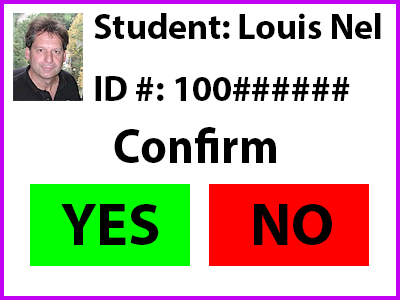
<style>
.page{position:relative;width:400px;height:300px;background:#ffffff}
.page>*{position:absolute;margin:0}
.t1{font:36px "MyriadPro-Bold";color:#000000}
.t2{font:49.7px "MyriadPro-Bold";color:#000000;scale:0.94 1}
.t3{font:60px "MyriadPro-Bold";color:#000000}
</style>
<div class="page">
<p class="t1" style="left:94px;top:13px;width:287px;height:26px">Student: Louis Nel</p>
<p class="t1" style="left:95px;top:76px;width:255px;height:25px">ID #: 100######</p>
<p class="t2" style="left:114px;top:127px;width:162px;height:36px">Confirm</p>
<p class="t3" style="left:61px;top:204px;width:98px;height:41px">YES</p>
<p class="t3" style="left:254px;top:204px;width:78px;height:41px">NO</p>
</div>
